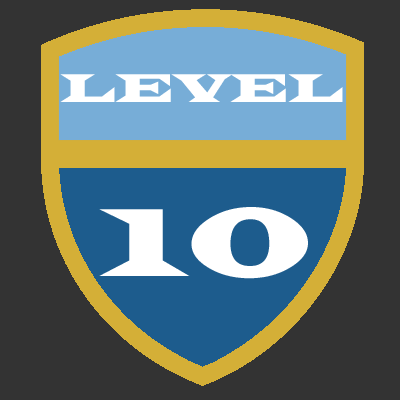
<style>
.page{position:relative;width:400px;height:400px;background:#333333}
.page>*{position:absolute;margin:0}
.t1{font:41.7px "LatinWide";color:#ffffff}
.t2{font:100px "LatinWide";color:#ffffff}
</style>
<div class="page">
<p class="t1" style="left:60px;top:74px;width:283px;height:28px">LEVEL</p>
<p class="t2" style="left:99px;top:207px;width:209px;height:72px">10</p>
</div>
